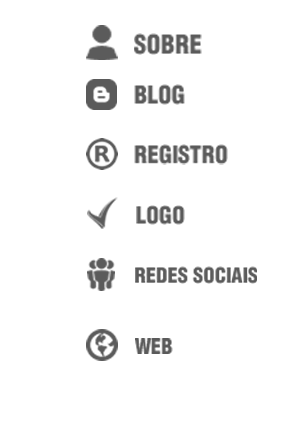
<style>
.page{position:relative;width:288px;height:426px;background:#ffffff}
.page>*{position:absolute;margin:0}
.t1{font:25.5px "Helvetica-CondensedBlack";color:#5a5a5a}
.t2{font:24px "Helvetica-CondensedBlack";color:#595959}
.t3{font:23.5px "Helvetica-CondensedBlack";color:#5a5a5a}
.t4{font:23px "Helvetica-CondensedBlack";color:#5a5a5a}
.t5{font:20.4px "Helvetica-CondensedBlack";color:#5a5a5a}
.t6{font:20.9px "Helvetica-CondensedBlack";color:#5a5a5a}
</style>
<div class="page">
<p class="t1" style="left:134px;top:33px;width:68px;height:22px">SOBRE</p>
<p class="t2" style="left:134px;top:84px;width:51px;height:21px">BLOG</p>
<p class="t3" style="left:134px;top:144px;width:94px;height:21px">REGISTRO</p>
<p class="t4" style="left:136px;top:205px;width:49px;height:20px">LOGO</p>
<p class="t5" style="left:135px;top:266px;width:122px;height:18px">REDES SOCIAIS</p>
<p class="t6" style="left:135px;top:338px;width:38px;height:16px">WEB</p>
</div>
